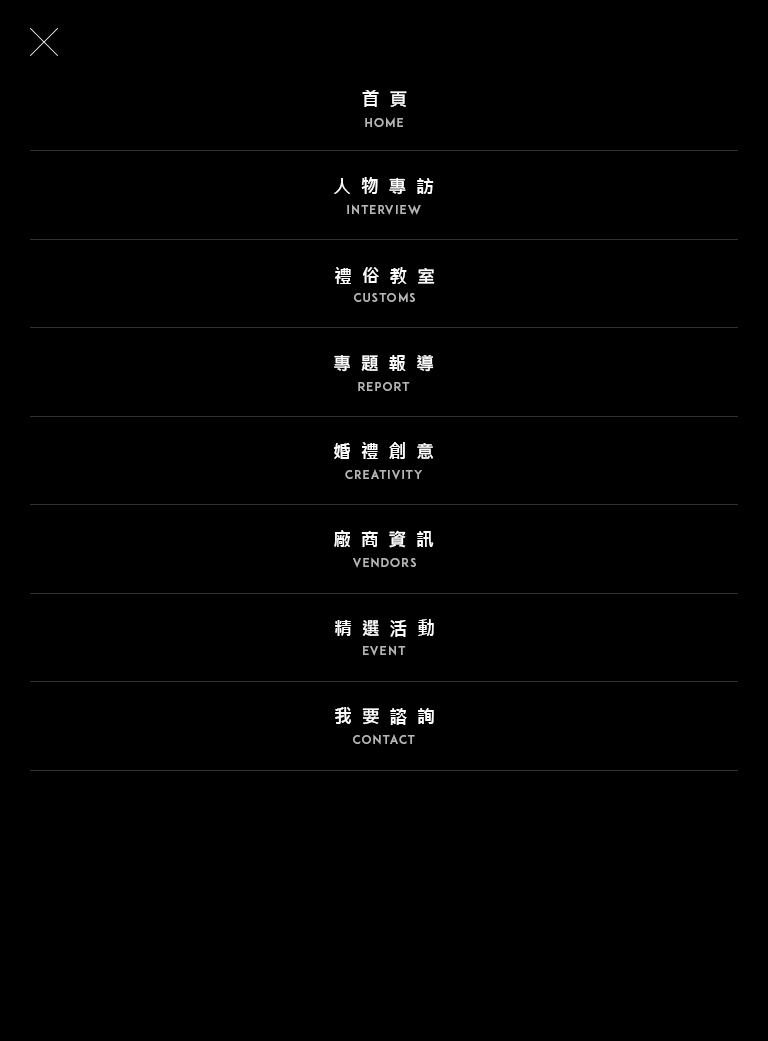
<style>
.page{position:relative;width:768px;height:1041px;background:#000000}
.page>*{position:absolute;margin:0}
.t1{font:18px "MicrosoftJhengHeiBold";letter-spacing:0.54em;color:#ffffff}
.t2{font:12px "ADAM.CGPRO";letter-spacing:0.1em;color:#b5b5b5}
</style>
<div class="page">
<p class="t1" style="left:362px;top:90px;width:45px;height:17px">首頁</p>
<p class="t2" style="left:365px;top:117px;width:38px;height:10px">HOME</p>
<p class="t1" style="left:334px;top:177px;width:100px;height:18px">人物專訪</p>
<p class="t2" style="left:347px;top:204px;width:74px;height:11px">INTERVIEW</p>
<p class="t1" style="left:335px;top:267px;width:100px;height:17px">禮俗教室</p>
<p class="t2" style="left:354px;top:292px;width:61px;height:10px">cUSTOMS</p>
<p class="t1" style="left:334px;top:355px;width:100px;height:17px">專題報導</p>
<p class="t2" style="left:358px;top:382px;width:52px;height:9px">report</p>
<p class="t1" style="left:334px;top:442px;width:99px;height:17px">婚禮創意</p>
<p class="t2" style="left:345px;top:469px;width:77px;height:11px">cREATIVITY</p>
<p class="t1" style="left:334px;top:530px;width:100px;height:18px">廠商資訊</p>
<p class="t2" style="left:353px;top:557px;width:63px;height:11px">vendors</p>
<p class="t1" style="left:335px;top:619px;width:99px;height:18px">精選活動</p>
<p class="t2" style="left:363px;top:645px;width:43px;height:11px">EVENT</p>
<p class="t1" style="left:335px;top:707px;width:99px;height:18px">我要諮詢</p>
<p class="t2" style="left:353px;top:734px;width:62px;height:11px">CONTACT</p>
</div>
